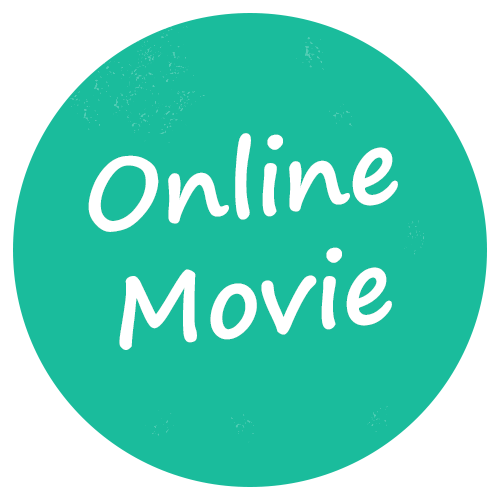
<style>
.page{position:relative;width:500px;height:500px;background:#1abc9c}
.page>*{position:absolute;margin:0}
.t1{font:99px "SegoePrint-Bold";color:#ffffff}
</style>
<div class="page">
<p class="t1" style="left:88px;top:133px;width:310px;height:217px;text-align:center;rotate:-6deg">Online<br>Movie</p>
</div>
